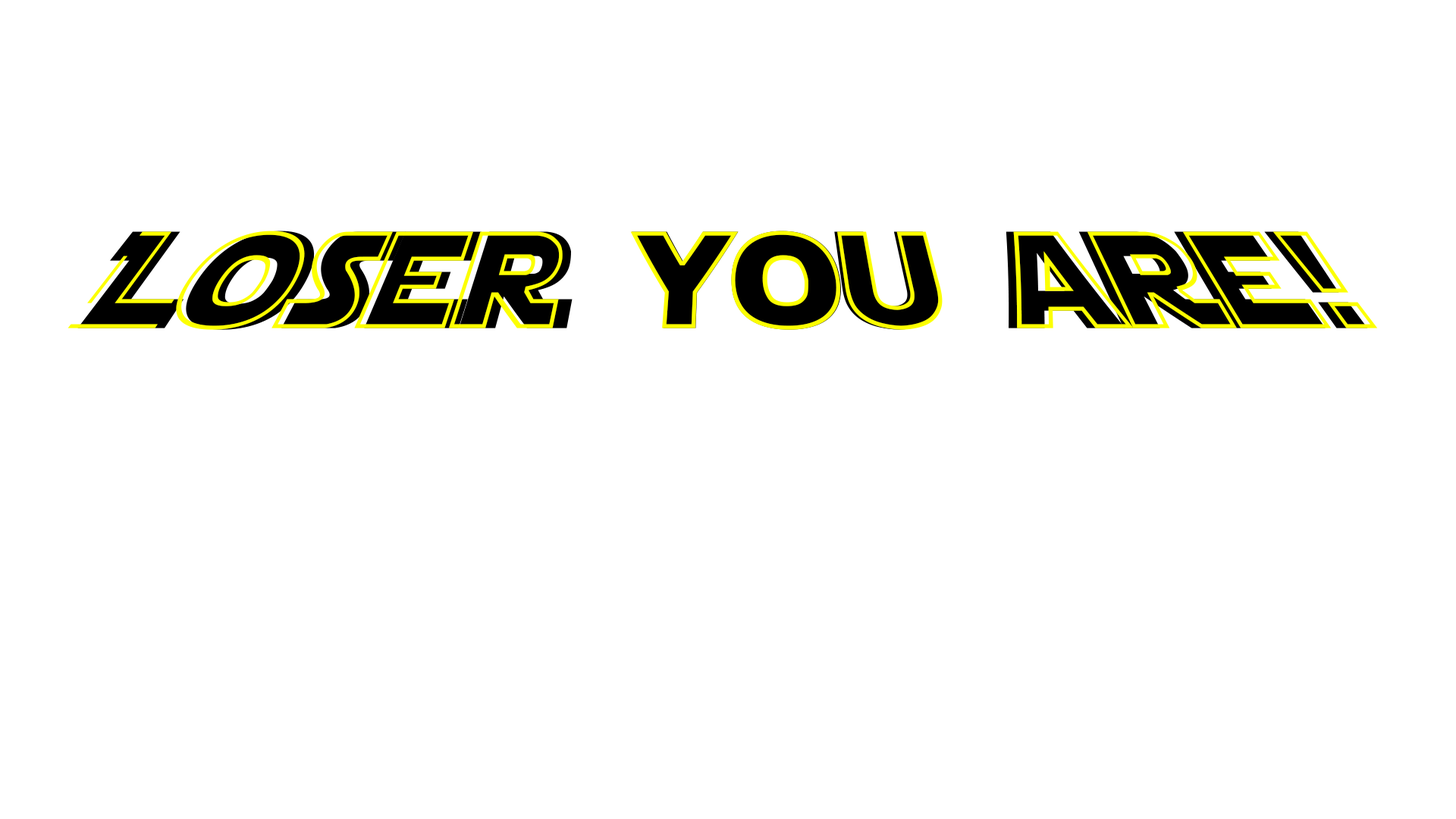
<style>
.page{position:relative;width:1456px;height:819px;background:#ffffff}
.page>*{position:absolute;margin:0}
.t1{font:136.5px "StarJediHollow";color:#fcff00}
.t2{font:136.5px "StarJedi";color:#000000}
</style>
<div class="page">
<p class="t1" style="left:67px;top:231px;width:1311px;height:99px">Loser you are!</p>
<p class="t2" style="left:77px;top:231px;width:1291px;height:99px">Loser you are!</p>
</div>
